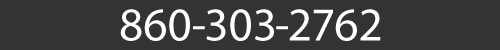
<style>
.page{position:relative;width:500px;height:50px;background:#333333}
.page>*{position:absolute;margin:0}
.t1{font:47.2px "MyriadPro-Regular";color:#ffffff}
.t2{font:47.2px "MyriadPro-Regular";letter-spacing:-0.04em;color:#ffffff}
.t3{font:47.2px "MyriadPro-Regular";letter-spacing:-0.02em;color:#ffffff}
</style>
<div class="page">
<p class="t1" style="left:120px;top:9px;width:261px;height:32px">860<span class="t2">-</span>30<span class="t2">3-</span><span class="t3">27</span>62</p>
</div>
